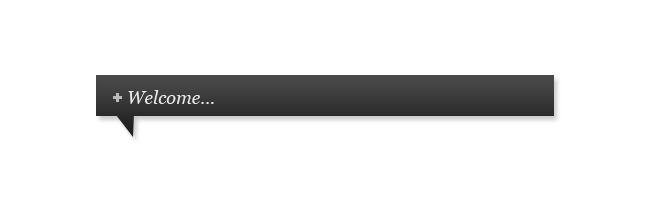
<style>
.page{position:relative;width:650px;height:212px;background:#ffffff}
.page>*{position:absolute;margin:0}
.t1{font:18px "Arial-BoldMT";color:#bababa}
.t2{font:18px "Georgia-Italic";color:#e9e9e9}
</style>
<div class="page">
<p class="t1" style="left:113px;top:93px;width:9px;height:9px">+</p>
<p class="t2" style="left:128px;top:90px;width:86px;height:14px">Welcome...</p>
</div>
